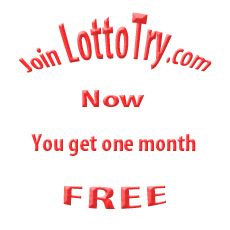
<style>
.page{position:relative;width:230px;height:230px;background:#ffffff}
.page>*{position:absolute;margin:0}
.t1{font:33.3px "MyriadPro-BoldCond";color:#0094cd;scale:0.8 1}
.t2{font:25px "MyriadPro-BoldCond";color:#d96938;scale:0.8 1}
.t3{font:25px "MyriadPro-BoldCond";color:#d96938;scale:1.67 1}
.t4{font:25px "MyriadPro-BoldCond";color:#d96938}
.t5{font:25px "MyriadPro-BoldCond";color:#d96938;scale:2.62 1}
</style>
<div class="page">
<p class="t1" style="left:18px;top:12px;width:194px;height:61px;opacity:0.83"><span class="t2">Join </span>LottoTry<span class="t2">.com</span></p>
<p class="t3" style="left:82px;top:90px;width:63px;height:17px;opacity:0.83">Now</p>
<p class="t4" style="left:31px;top:134px;width:165px;height:22px;opacity:0.83">You get one month</p>
<p class="t5" style="left:63px;top:185px;width:103px;height:24px;opacity:0.83">FREE</p>
</div>
